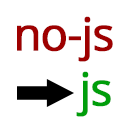
<style>
.page{position:relative;width:128px;height:128px;background:#ffffff}
.page>*{position:absolute;margin:0}
.t1{font:45.3px "OpenSans";letter-spacing:-0.04em;color:#9e0000;font-weight:bold}
.t2{font:45.3px "OpenSans";letter-spacing:-0.04em;color:#009e0b;font-weight:bold}
</style>
<div class="page">
<p class="t1" style="left:17px;top:16px;width:96px;height:46px">no-js</p>
<p class="t2" style="left:76px;top:71px;width:35px;height:46px">js</p>
</div>
